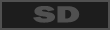
<style>
.page{position:relative;width:110px;height:30px;background:#1d1d1d}
.page>*{position:absolute;margin:0}
.t1{font:24px "FranklinGothic-Heavy";color:#505050;scale:1.5 1}
</style>
<div class="page">
<p class="t1" style="left:33px;top:6px;width:47px;height:17px">SD</p>
</div>
